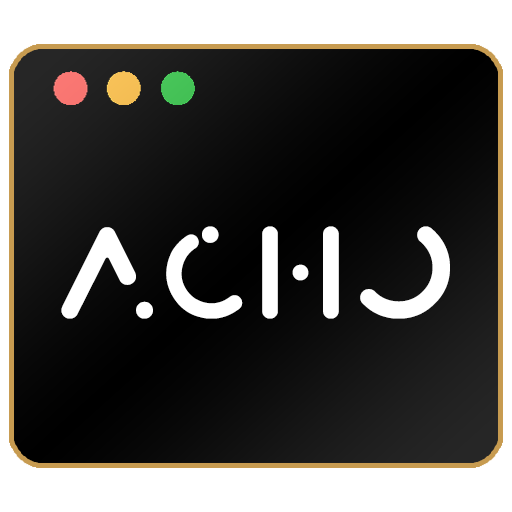
<style>
.page{position:relative;width:512px;height:512px;background:#ffffff}
.page>*{position:absolute;margin:0}
.t1{font:110px "Alexana";color:#ffffff}
</style>
<div class="page">
<p class="t1" style="left:61px;top:226px;width:389px;height:93px">Acho</p>
</div>
